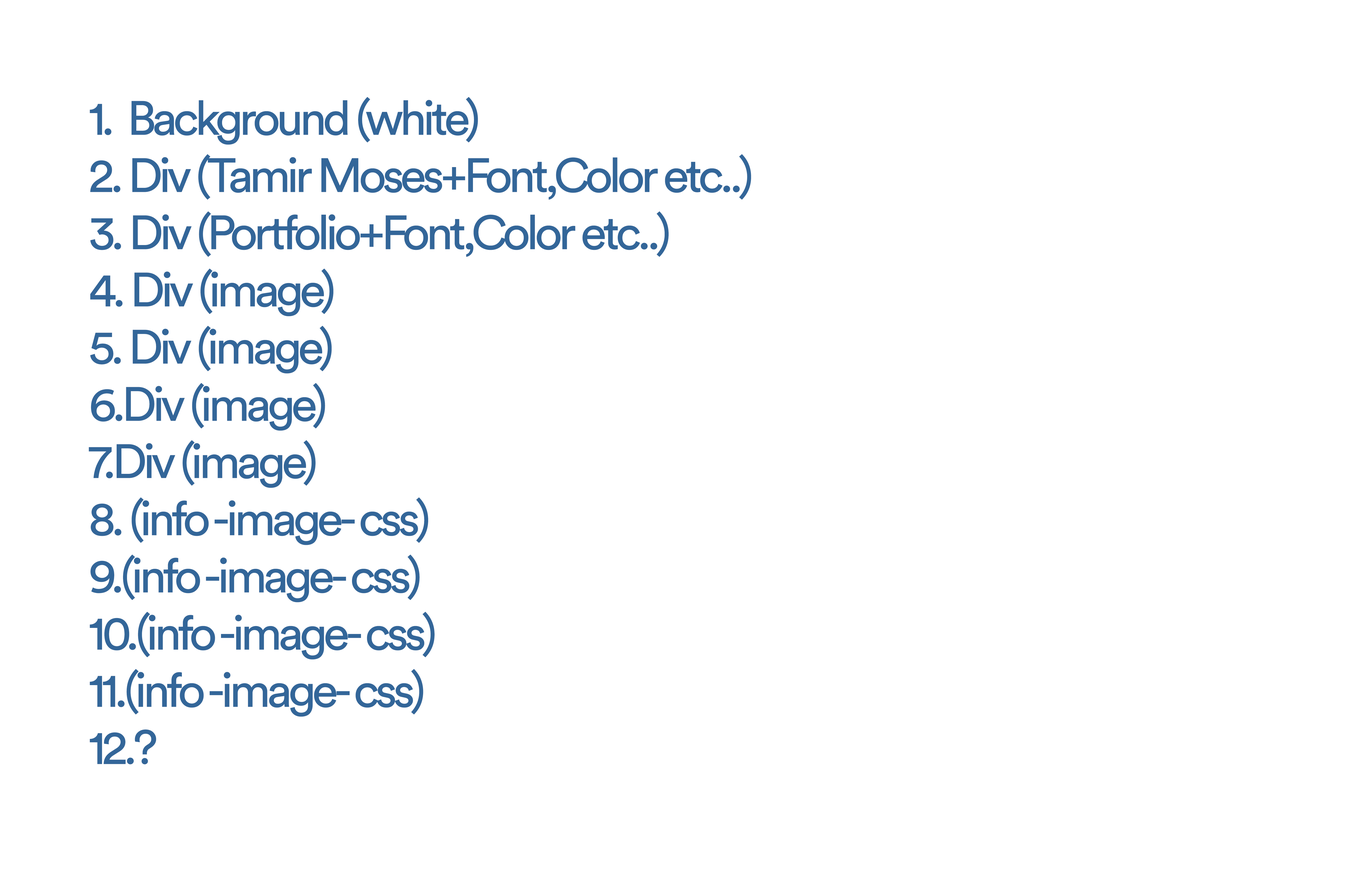
<style>
.page{position:relative;width:1358px;height:878px;background:#ffffff}
.page>*{position:absolute;margin:0}
.t1{font:47.7px "CircularStd-Book";letter-spacing:-0.08em;color:#336699}
</style>
<div class="page">
<p class="t1" style="left:89px;top:97px;width:662px;height:668px">1.  Background (white)<br>2. Div (Tamir Moses+Font,Color etc..)<br>3. Div (Portfolio+Font,Color etc..)<br>4. Div (image)<br>5. Div (image)<br>6.Div (image)<br>7.Div (image)<br>8. (info -image- css)<br>9.(info -image- css)<br>10.(info -image- css)<br>11.(info -image- css)<br>12.?</p>
</div>
